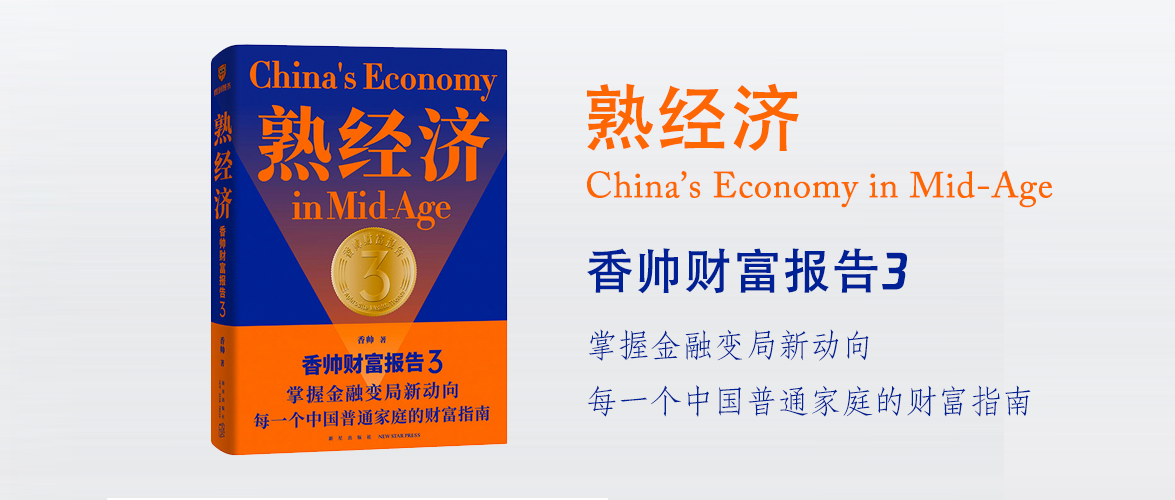
<style>
.page{position:relative;width:1175px;height:500px}
.page>*{position:absolute;margin:0}
.t1{font:72px "STHeiti";color:#fd6600;font-weight:bold}
.t2{font:36px "ACaslonPro-Regular";color:#fd6600;font-weight:bold}
.t3{font:48px "AdobeHeitiStd-Regular";color:#002195;font-weight:bold}
.t4{font:48px "FontName";color:#002195;font-weight:bold}
.t5{font:32px "AdobeFangsongStd-Regular";color:#002195}
</style>
<div class="page">
<p class="t1" style="left:587px;top:83px;width:212px;height:68px">熟经济</p>
<p class="t2" style="left:587px;top:170px;width:466px;height:38px">China’s Economy in Mid-Age</p>
<p class="t3" style="left:587px;top:248px;width:320px;height:46px">香帅财富报告<span class="t4">3</span></p>
<p class="t5" style="left:587px;top:329px;width:444px;height:88px">掌握金融变局新动向<br>每一个中国普通家庭的财富指南</p>
</div>
